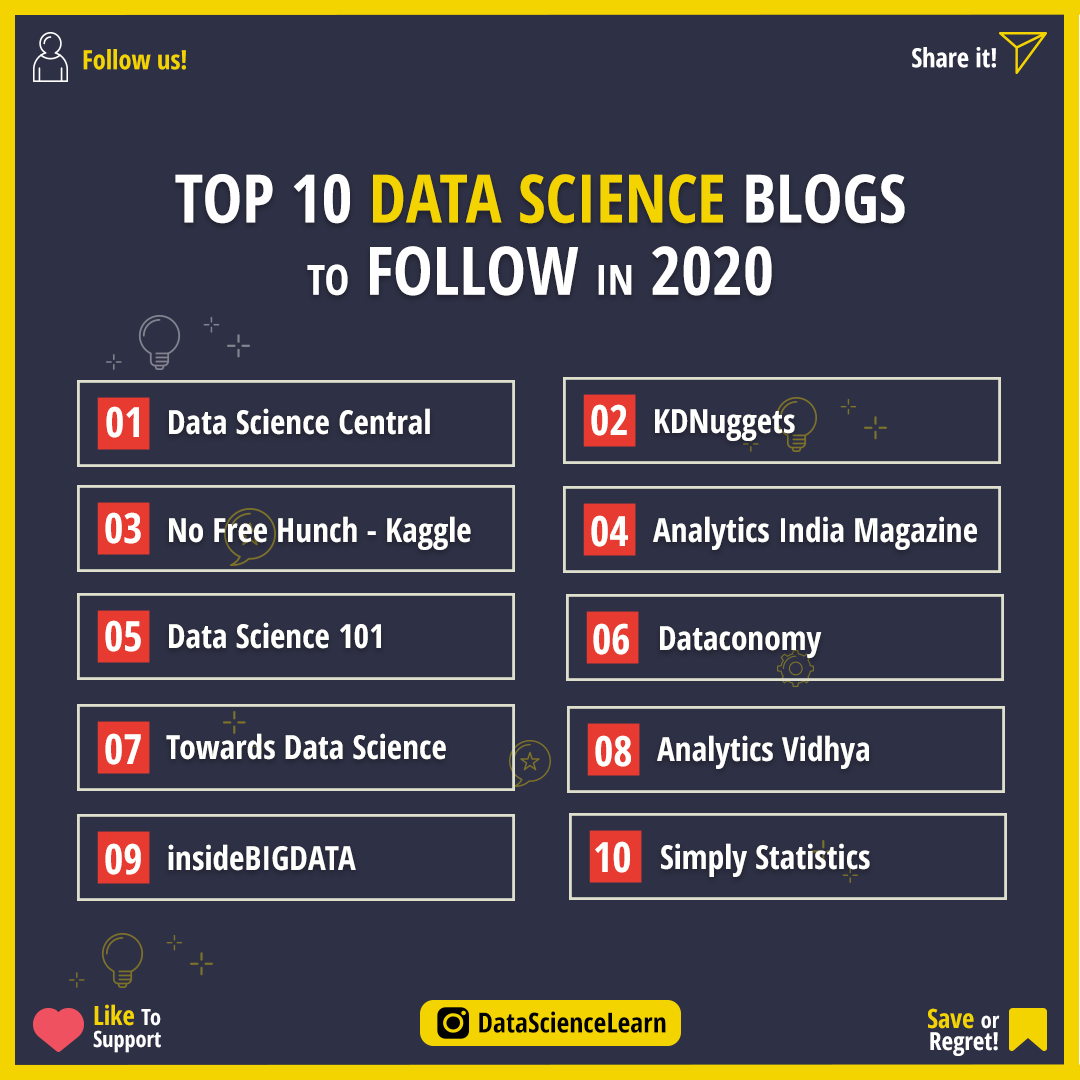
<style>
.page{position:relative;width:1080px;height:1080px;background:#2e3045}
.page>*{position:absolute;margin:0}
.t1{font:26.4px "OpenSans-CondensedBold";color:#f3d400}
.t2{font:26.4px "OpenSans-CondensedBold";color:#ffffff}
.t3{font:66.7px/72.2px "OpenSans-CondensedBold";color:#f3d400}
.t4{font:66.7px/72.2px "OpenSans-CondensedBold";color:#ffffff}
.t5{font:41.7px/72.2px "OpenSans-CondensedBold";color:#ffffff}
.t6{font:41.7px "OpenSans-CondensedBold";color:#fffffe}
.t7{font:33.3px "OpenSans-CondensedBold";color:#fffffe}
.t8{font:22.2px/22.2px "OpenSans-CondensedBold";color:#ffffff}
.t9{font:26.4px/22.2px "OpenSans-CondensedBold";color:#f3d400}
.t10{font:27.8px "OpenSans-CondensedBold";color:#000000}
.t11{font:25px/22.2px "OpenSans-CondensedBold";color:#ffffff}
</style>
<div class="page">
<p class="t1" style="left:83px;top:49px;width:103px;height:21px">Follow us!</p>
<p class="t2" style="left:912px;top:47px;width:84px;height:21px">Share it!</p>
<p class="t3" style="left:175px;top:174px;width:730px;height:122px;text-align:center"><span class="t4">TOP 10 </span>DATA SCIENCE <span class="t4">BLOGS<br></span><span class="t5">TO</span><span class="t4"> FOLLOW </span><span class="t5">IN</span><span class="t4"> 2020</span></p>
<p class="t6" style="left:106px;top:406px;width:33px;height:32px">01</p>
<p class="t7" style="left:169px;top:408px;width:261px;height:27px">Data Science Central</p>
<p class="t6" style="left:591px;top:404px;width:36px;height:32px">02</p>
<p class="t7" style="left:655px;top:409px;width:140px;height:32px">KDNuggets</p>
<p class="t6" style="left:105px;top:512px;width:36px;height:32px">03</p>
<p class="t7" style="left:169px;top:516px;width:302px;height:34px">No Free Hunch - Kaggle</p>
<p class="t6" style="left:591px;top:515px;width:37px;height:32px">04</p>
<p class="t7" style="left:653px;top:516px;width:324px;height:34px">Analytics India Magazine</p>
<p class="t6" style="left:105px;top:620px;width:36px;height:32px">05</p>
<p class="t7" style="left:169px;top:622px;width:212px;height:27px">Data Science 101</p>
<p class="t6" style="left:593px;top:623px;width:36px;height:32px">06</p>
<p class="t7" style="left:660px;top:626px;width:162px;height:32px">Dataconomy</p>
<p class="t6" style="left:105px;top:733px;width:36px;height:32px">07</p>
<p class="t7" style="left:166px;top:733px;width:280px;height:27px">Towards Data Science</p>
<p class="t6" style="left:595px;top:735px;width:36px;height:32px">08</p>
<p class="t7" style="left:657px;top:735px;width:212px;height:34px">Analytics Vidhya</p>
<p class="t6" style="left:105px;top:843px;width:36px;height:32px">09</p>
<p class="t7" style="left:168px;top:844px;width:188px;height:27px">insideBIGDATA</p>
<p class="t6" style="left:595px;top:841px;width:35px;height:32px">10</p>
<p class="t7" style="left:661px;top:843px;width:209px;height:34px">Simply Statistics</p>
<p class="t8" style="left:93px;top:1004px;width:68px;height:49px"><span class="t9">Like </span>To<br>Support</p>
<p class="t10" style="left:479px;top:1011px;width:187px;height:22px">DataScienceLearn</p>
<p class="t11" style="left:928px;top:1008px;width:72px;height:48px;text-align:right"><span class="t9">Save </span><span class="t8">or<br></span>Regret!</p>
</div>
